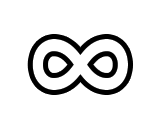
<style>
.page{position:relative;width:161px;height:128px;background:#ffffff}
.page>*{position:absolute;margin:0}
.t1{font:28.8px "SourceHanSans-Bold";letter-spacing:0.15em;color:#ffffff;scale:0.84 1}
</style>
<div class="page">
<p class="t1" style="left:32px;top:38px;width:97px;height:52px;text-align:center">∞</p>
</div>
